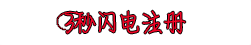
<style>
.page{position:relative;width:251px;height:45px;background:#ffffff}
.page>*{position:absolute;margin:0}
.t1{font:23.5px "¹ - ÇéÊéÌå";letter-spacing:-0.04em;color:#f40527}
</style>
<div class="page">
<p class="t1" style="left:57px;top:10px;width:129px;height:24px">3秒闪电注册</p>
</div>
